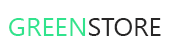
<style>
.page{position:relative;width:170px;height:50px;background:#ffffff}
.page>*{position:absolute;margin:0}
.t1{font:26px "SegoeUI";color:#31e38d}
.t2{font:26px "SegoeUI";color:#272626}
</style>
<div class="page">
<p class="t1" style="left:9px;top:18px;width:152px;height:18px">GREEN<span class="t2">STORE</span></p>
</div>
